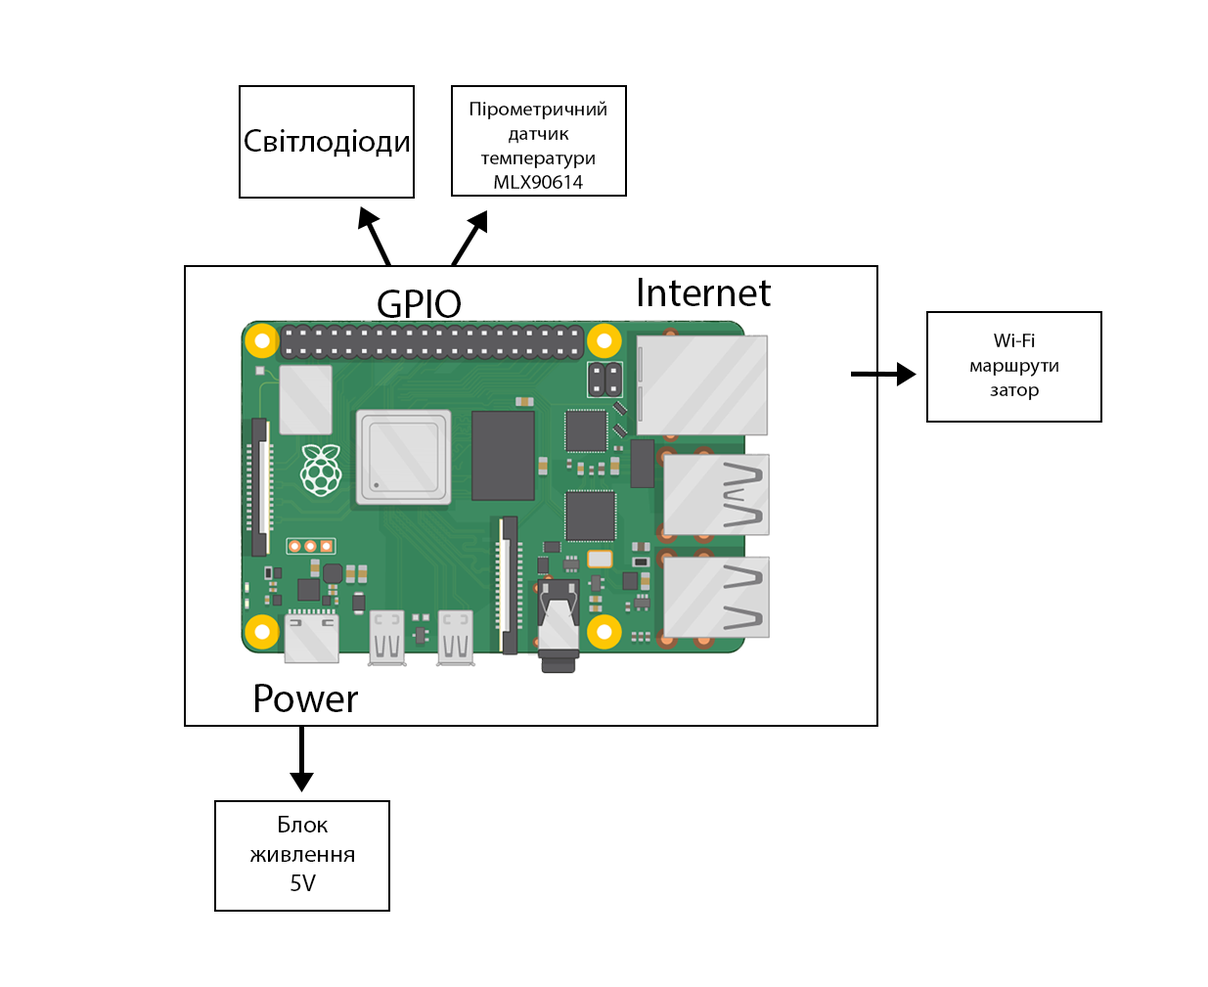
<style>
.page{position:relative;width:1208px;height:987px;background:#ffffff}
.page>*{position:absolute;margin:0}
.t1{font:20.4px "MyriadPro-Regular";color:#000000}
.t2{font:32.6px "MyriadPro-Regular";color:#000000}
.t3{font:40.8px "MyriadPro-Regular";color:#000000}
.t4{font:24.5px "MyriadPro-Regular";color:#000000}
</style>
<div class="page">
<p class="t1" style="left:470px;top:101px;width:136px;height:88px;text-align:center">Пірометричний датчик температури MLX90614</p>
<p class="t2" style="left:245px;top:129px;width:164px;height:28px">Світлодіоди</p>
<p class="t3" style="left:639px;top:278px;width:132px;height:28px">Internet</p>
<p class="t3" style="left:378px;top:290px;width:83px;height:28px">GPIO</p>
<p class="t1" style="left:970px;top:334px;width:88px;height:66px;text-align:center">Wi-Fi<br>маршрутизатор</p>
<p class="t3" style="left:255px;top:684px;width:103px;height:28px">Power</p>
<p class="t4" style="left:249px;top:816px;width:105px;height:75px;text-align:center">Блок живлення<br>5V</p>
</div>
